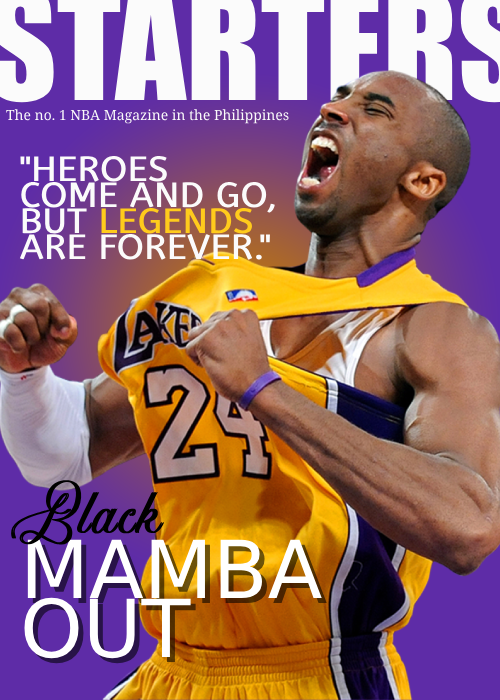
<style>
.page{position:relative;width:500px;height:700px}
.page>*{position:absolute;margin:0}
.t1{font:14px "NotoSerifGeorgian-Regular";color:#fbfbfb}
.t2{font:35px/26px "ABeeZee-Regular";color:#fbfbfb;font-weight:bold}
.t3{font:35px/26px "ABeeZee-Regular";color:#ffcb1c;font-weight:bold}
.t4{font:70px "Avenue-du-Vapoteur";color:#000000;font-weight:bold}
.t5{font:80px/59px "DejaVuSans";color:#ffffff}
</style>
<div class="page">
<p class="t1" style="left:6px;top:109px;width:283px;height:15px">The no. 1 NBA Magazine in the Philippines</p>
<p class="t2" style="left:19px;top:156px;width:256px;height:104px">"HEROES<br>COME AND GO,<br>BUT <span class="t3">LEGENDS<br></span>ARE FOREVER."</p>
<p class="t4" style="left:11px;top:480px;width:154px;height:65px">Black</p>
<p class="t5" style="left:24px;top:539px;width:298px;height:120px">MAMBA<br>OUT</p>
</div>
